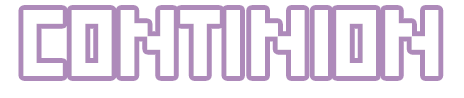
<style>
.page{position:relative;width:464px;height:98px;background:#ffffff}
.page>*{position:absolute;margin:0}
.t1{font:91.4px "DSPixelCyr";letter-spacing:0.025em;color:#ffffff}
</style>
<div class="page">
<p class="t1" style="left:23px;top:10px;width:416px;height:66px">Continion</p>
</div>
